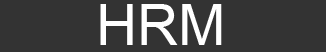
<style>
.page{position:relative;width:326px;height:52px;background:#333333}
.page>*{position:absolute;margin:0}
.t1{font:56.6px "ArialMT";color:#ffffff}
</style>
<div class="page">
<p class="t1" style="left:100px;top:4px;width:122px;height:41px">HRM</p>
</div>
